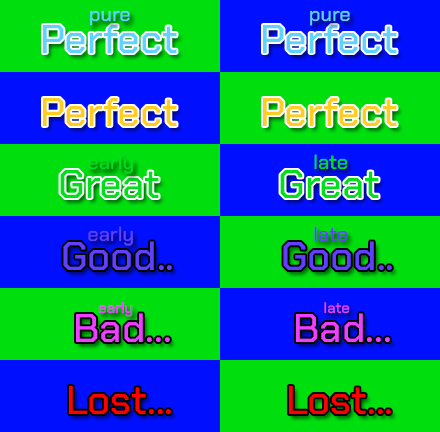
<style>
.page{position:relative;width:440px;height:432px;background:#00df0e}
.page>*{position:absolute;margin:0}
.t1{font:20px "ChakraPetch-Medium";color:#60d2ff}
.t2{font:40px "ChakraPetch-Medium";color:#60d2ff}
.t3{font:40px "ChakraPetch-Medium";color:#ffcc20}
.t4{font:20px "ChakraPetch-Medium";color:#00df1d}
.t5{font:40px "ChakraPetch-Medium";color:#00df1d}
.t6{font:20px "ChakraPetch-Medium";color:#5f40ff}
.t7{font:40px "ChakraPetch-Medium";color:#5f40ff}
.t8{font:15px "ChakraPetch-Medium";color:#ec40ff}
.t9{font:40px "ChakraPetch-Medium";color:#ec40ff}
.t10{font:40px "ChakraPetch-Medium";color:#ff0000}
</style>
<div class="page">
<p class="t1" style="left:90px;top:10px;width:40px;height:16px">pure</p>
<p class="t1" style="left:310px;top:10px;width:40px;height:16px">pure</p>
<p class="t2" style="left:43px;top:25px;width:134px;height:28px">Perfect</p>
<p class="t2" style="left:263px;top:25px;width:134px;height:28px">Perfect</p>
<p class="t3" style="left:43px;top:98px;width:134px;height:28px">Perfect</p>
<p class="t3" style="left:263px;top:98px;width:134px;height:28px">Perfect</p>
<p class="t4" style="left:88px;top:154px;width:45px;height:20px">early</p>
<p class="t4" style="left:314px;top:154px;width:34px;height:16px">late</p>
<p class="t5" style="left:60px;top:170px;width:99px;height:28px">Great</p>
<p class="t5" style="left:280px;top:170px;width:99px;height:28px">Great</p>
<p class="t6" style="left:88px;top:226px;width:45px;height:20px">early</p>
<p class="t6" style="left:314px;top:226px;width:34px;height:16px">late</p>
<p class="t7" style="left:63px;top:241px;width:109px;height:29px">Good..</p>
<p class="t7" style="left:283px;top:241px;width:109px;height:29px">Good..</p>
<p class="t8" style="left:98px;top:302px;width:35px;height:15px">early</p>
<p class="t8" style="left:324px;top:302px;width:26px;height:12px">late</p>
<p class="t9" style="left:76px;top:313px;width:94px;height:29px">Bad...</p>
<p class="t9" style="left:296px;top:313px;width:94px;height:29px">Bad...</p>
<p class="t10" style="left:69px;top:386px;width:102px;height:28px">Lost...</p>
<p class="t10" style="left:289px;top:386px;width:102px;height:28px">Lost...</p>
</div>
